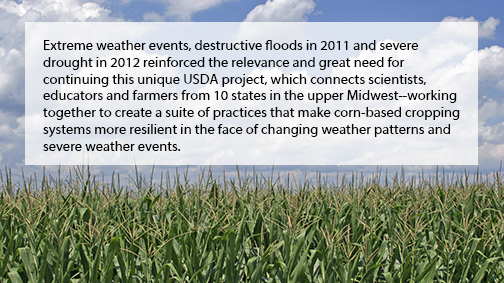
<style>
.page{position:relative;width:504px;height:283px}
.page>*{position:absolute;margin:0}
.t1{font:14px "MyriadWebPro";color:#000000}
</style>
<div class="page">
<p class="t1" style="left:43px;top:40px;width:417px;height:111px">Extreme weather events, destructive floods in 2011 and severe drought in 2012 reinforced the relevance and great need for <br>continuing this unique USDA project, which connects scientists, <br>educators and farmers from 10 states in the upper Midwest--working together to create a suite of practices that make corn-based cropping systems more resilient in the face of changing weather patterns and severe weather events.</p>
</div>
